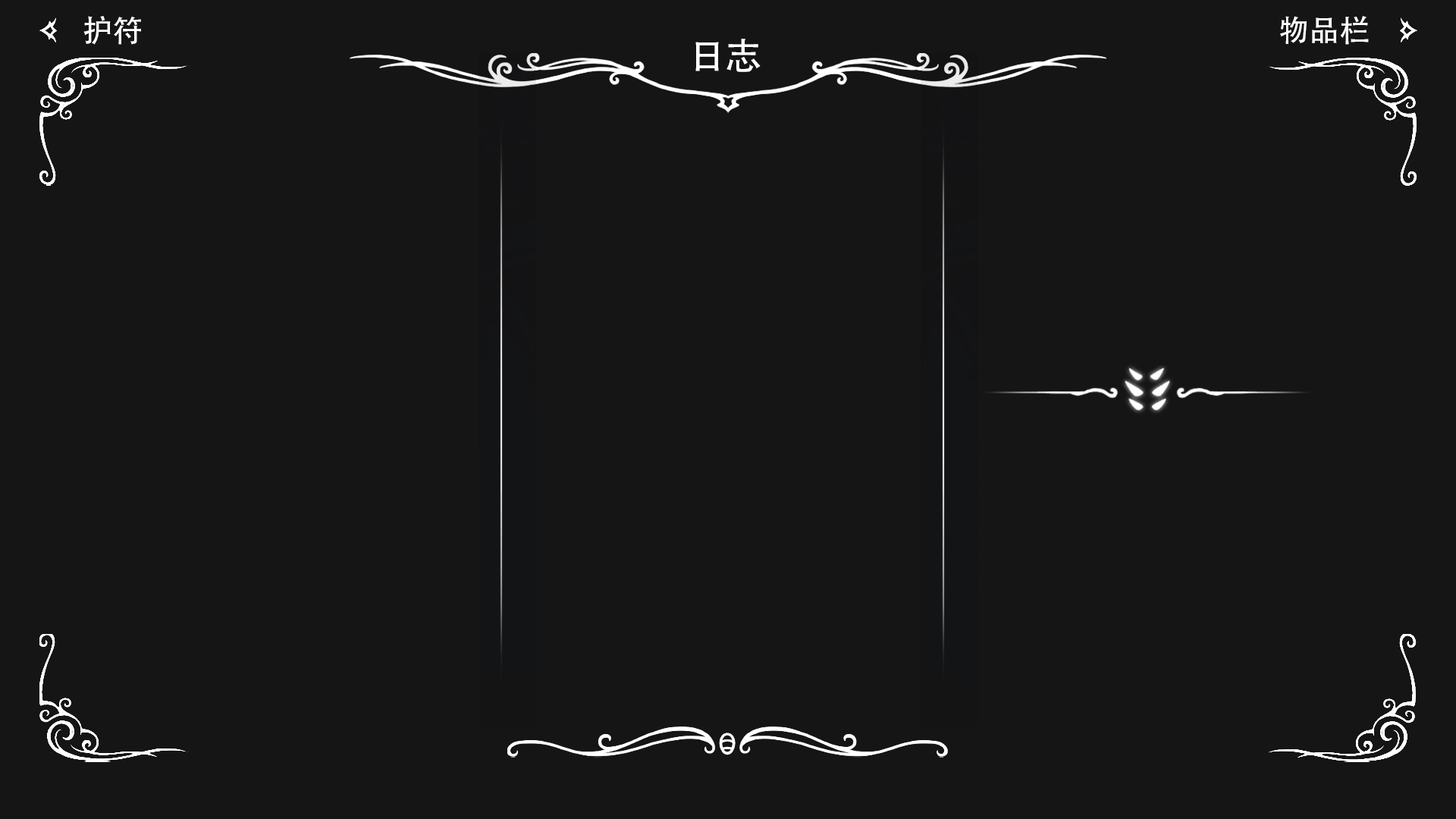
<style>
.page{position:relative;width:1456px;height:819px;background:#151516}
.page>*{position:absolute;margin:0}
.t1{font:30.3px "AdobeHeitiStd-Regular";color:#ffffff}
.t2{font:36.4px "AdobeHeitiStd-Regular";color:#ffffff}
</style>
<div class="page">
<p class="t1" style="left:83px;top:16px;width:58px;height:29px">护符</p>
<p class="t1" style="left:1280px;top:16px;width:89px;height:29px">物品栏</p>
<p class="t2" style="left:695px;top:39px;width:66px;height:33px">日志</p>
</div>
